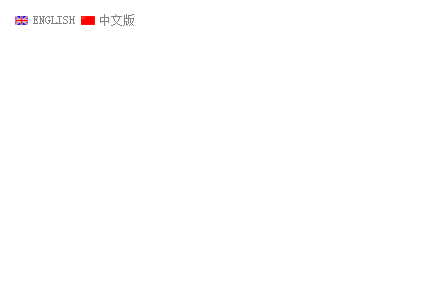
<style>
.page{position:relative;width:438px;height:308px;background:#ffffff}
.page>*{position:absolute;margin:0}
.t1{font:12px "SimSun";color:#838383}
</style>
<div class="page">
<p class="t1" style="left:33px;top:14px;width:101px;height:12px">ENGLISH    中文版</p>
</div>
